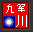
<style>
.page{position:relative;width:33px;height:32px;background:#f20000}
.page>*{position:absolute;margin:0}
.t1{font:10.4px "SimSun";color:#ffffff}
.t2{font:11.7px "SimSun";color:#ffffff}
</style>
<div class="page">
<p class="t1" style="left:6px;top:4px;width:19px;height:9px">九军</p>
<p class="t2" style="left:16px;top:15px;width:11px;height:12px">川</p>
</div>
